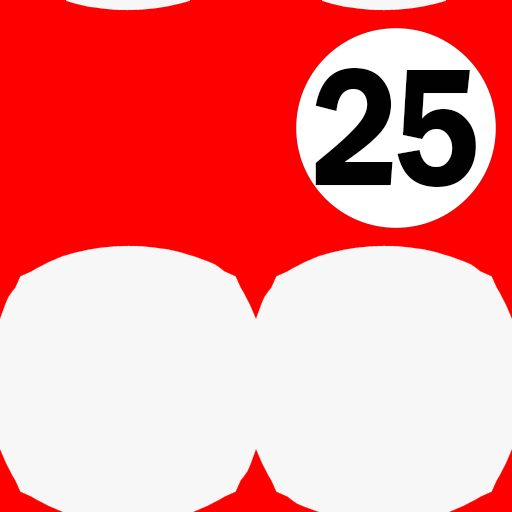
<style>
.page{position:relative;width:512px;height:512px;background:#f7f7f7}
.page>*{position:absolute;margin:0}
.t1{font:172.5px "FranklinGothic-Demi";letter-spacing:-0.05em;color:#010101;scale:0.87 1}
</style>
<div class="page">
<p class="t1" style="left:315px;top:68px;width:161px;height:119px">25</p>
</div>
